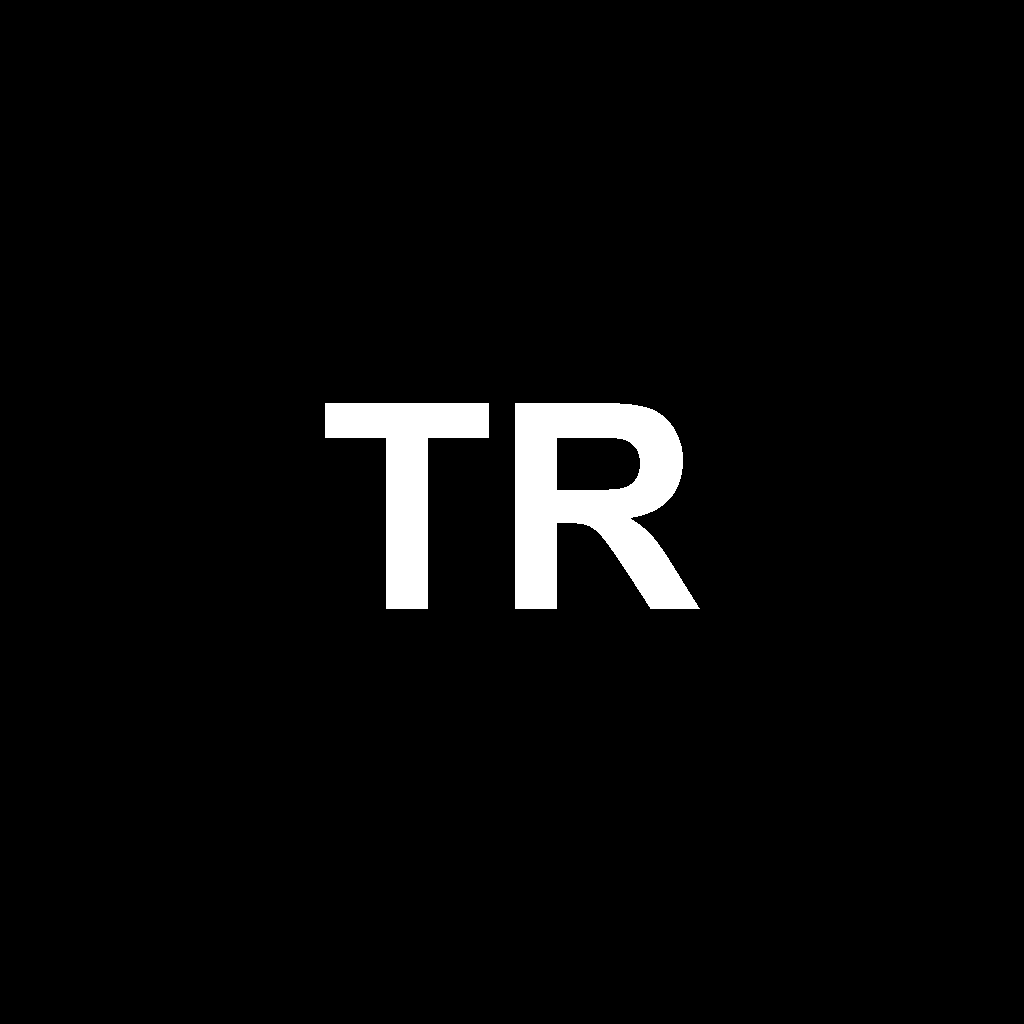
<style>
.page{position:relative;width:1024px;height:1024px;background:#000000}
.page>*{position:absolute;margin:0}
.t1{font:287.5px "Arial-BoldMT";color:#ffffff}
</style>
<div class="page">
<p class="t1" style="left:325px;top:403px;width:375px;height:206px">TR</p>
</div>
